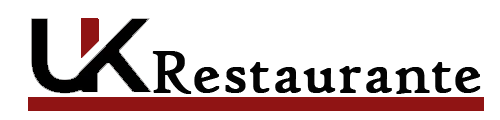
<style>
.page{position:relative;width:500px;height:120px;background:#ffffff}
.page>*{position:absolute;margin:0}
.t1{font:63.7px "HighTowerText-Reg";color:#030303;font-weight:bold}
</style>
<div class="page">
<p class="t1" style="left:152px;top:51px;width:329px;height:43px">Restaurante</p>
</div>
